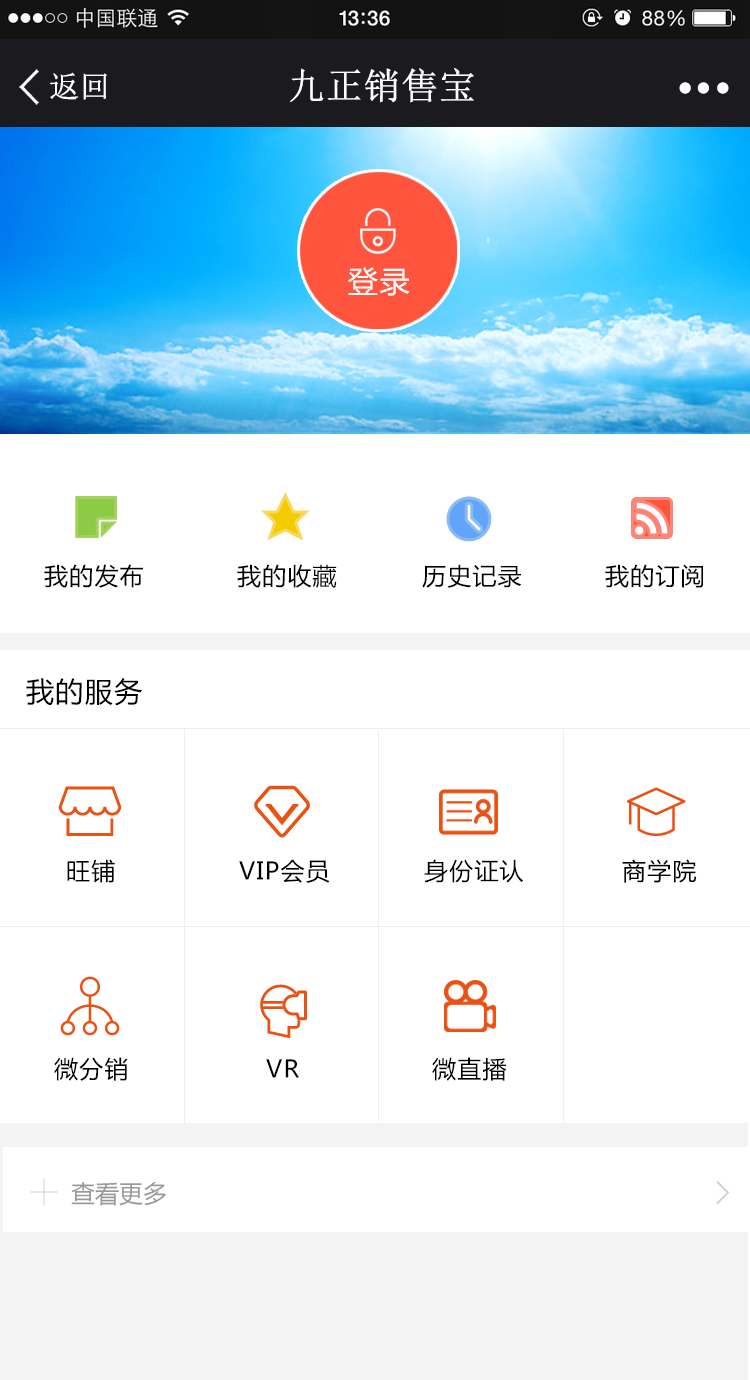
<style>
.page{position:relative;width:750px;height:1380px;background:#ffffff}
.page>*{position:absolute;margin:0}
.t1{font:30px "NSimSun";color:#ffffff;font-weight:bold}
.t2{font:36.7px "NSimSun";color:#ffffff;font-weight:bold}
.t3{font:30px "MicrosoftYaHei";letter-spacing:0.05em;color:#ffffff}
.t4{font:24px "MicrosoftYaHei";letter-spacing:0.05em;color:#000000}
.t5{font:28px "MicrosoftYaHei";letter-spacing:0.05em;color:#000000}
.t6{font:24px "MicrosoftYaHei";color:#999999}
</style>
<div class="page">
<p class="t1" style="left:50px;top:72px;width:57px;height:28px">返回</p>
<p class="t2" style="left:290px;top:68px;width:184px;height:35px">九正销售宝</p>
<p class="t3" style="left:348px;top:267px;width:62px;height:29px">登录</p>
<p class="t4" style="left:44px;top:564px;width:99px;height:24px">我的发布</p>
<p class="t4" style="left:237px;top:564px;width:100px;height:24px">我的收藏</p>
<p class="t4" style="left:422px;top:564px;width:100px;height:24px">历史记录</p>
<p class="t4" style="left:605px;top:564px;width:98px;height:24px">我的订阅</p>
<p class="t5" style="left:26px;top:678px;width:116px;height:28px">我的服务</p>
<p class="t4" style="left:67px;top:859px;width:48px;height:24px">旺铺</p>
<p class="t4" style="left:239px;top:859px;width:91px;height:24px">VIP会员</p>
<p class="t4" style="left:424px;top:859px;width:100px;height:24px">身份证认</p>
<p class="t4" style="left:622px;top:859px;width:75px;height:24px">商学院</p>
<p class="t4" style="left:54px;top:1057px;width:74px;height:24px">微分销</p>
<p class="t4" style="left:266px;top:1059px;width:33px;height:19px">VR</p>
<p class="t4" style="left:432px;top:1057px;width:75px;height:24px">微直播</p>
<p class="t6" style="left:71px;top:1182px;width:95px;height:24px">查看更多</p>
</div>
